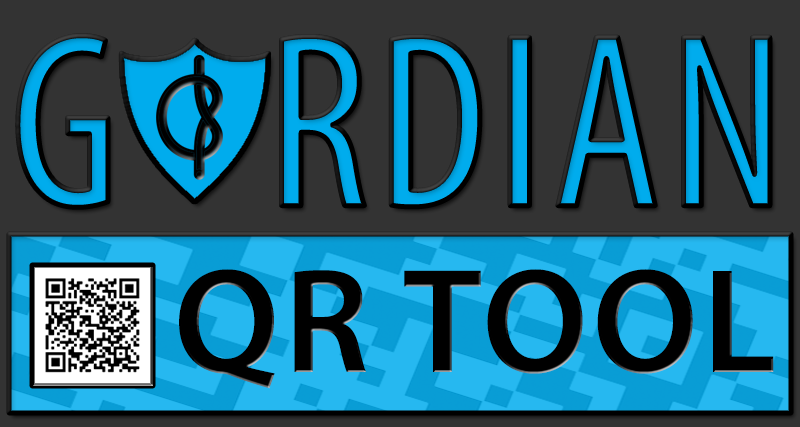
<style>
.page{position:relative;width:800px;height:427px;background:#333333}
.page>*{position:absolute;margin:0}
.t1{font:250px "MyriadPro-Cond";letter-spacing:0.03em}
.t2{font:150px "MyriadPro-Semibold";letter-spacing:0.03em;color:#000000}
</style>
<div class="page">
<p class="t1" style="left:17px;top:35px;width:753px;height:173px">G   RDIAN</p>
<p class="t2" style="left:179px;top:269px;width:595px;height:120px">QR TOOL</p>
</div>
